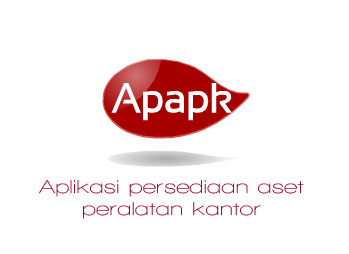
<style>
.page{position:relative;width:349px;height:254px;background:#ffffff}
.page>*{position:absolute;margin:0}
.t1{font:18.7px "WalkwayExpand";color:#a50a27}
</style>
<div class="page">
<p class="t1" style="left:39px;top:180px;width:265px;height:39px;text-align:center">Aplikasi persediaan aset peralatan kantor</p>
</div>
